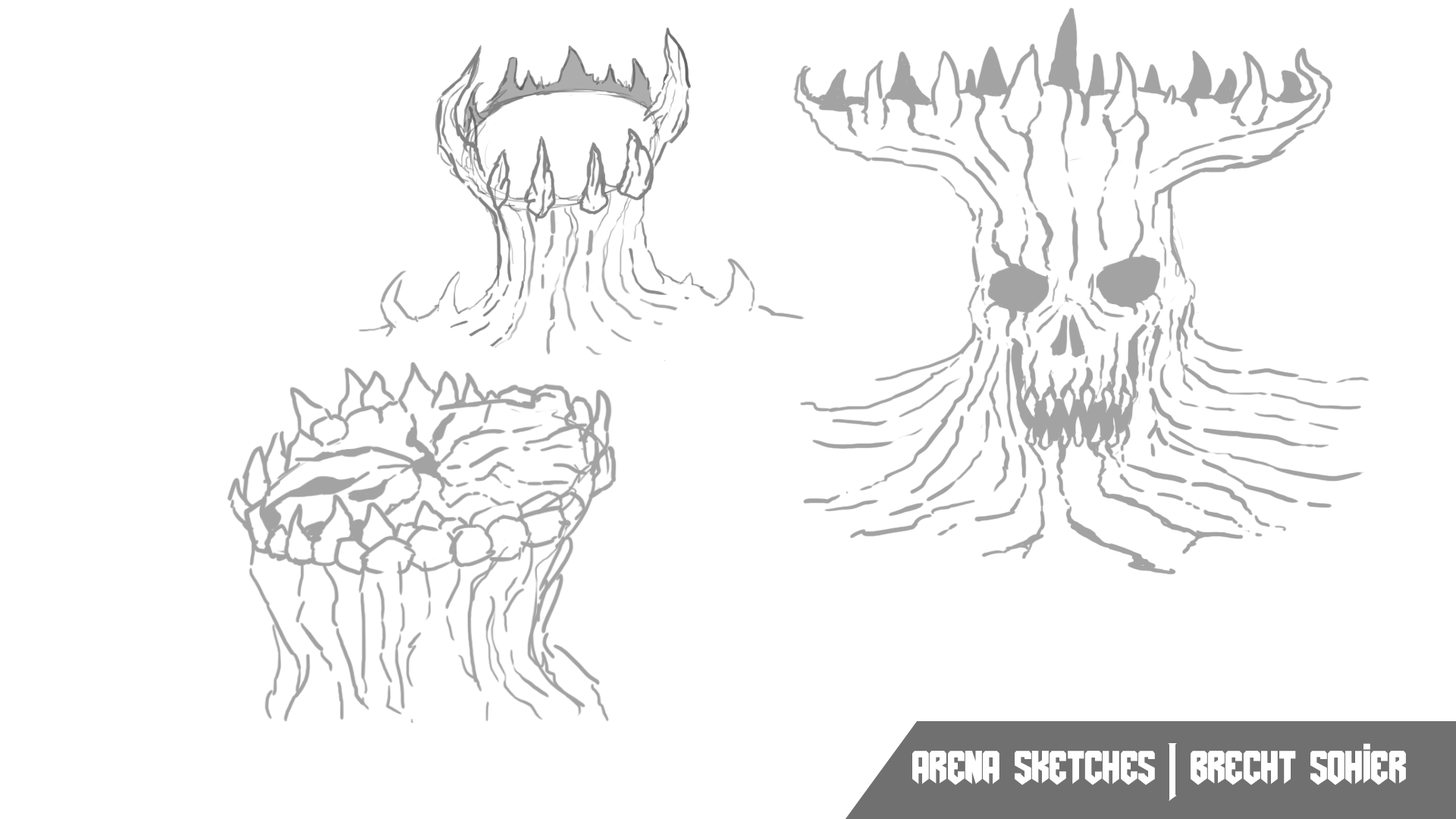
<style>
.page{position:relative;width:1456px;height:819px;background:#ffffff}
.page>*{position:absolute;margin:0}
.t1{font:54.6px "AmazDooMLeft";color:#ffffff}
</style>
<div class="page">
<p class="t1" style="left:912px;top:743px;width:494px;height:58px">arena sketches | brecht sohier</p>
</div>
